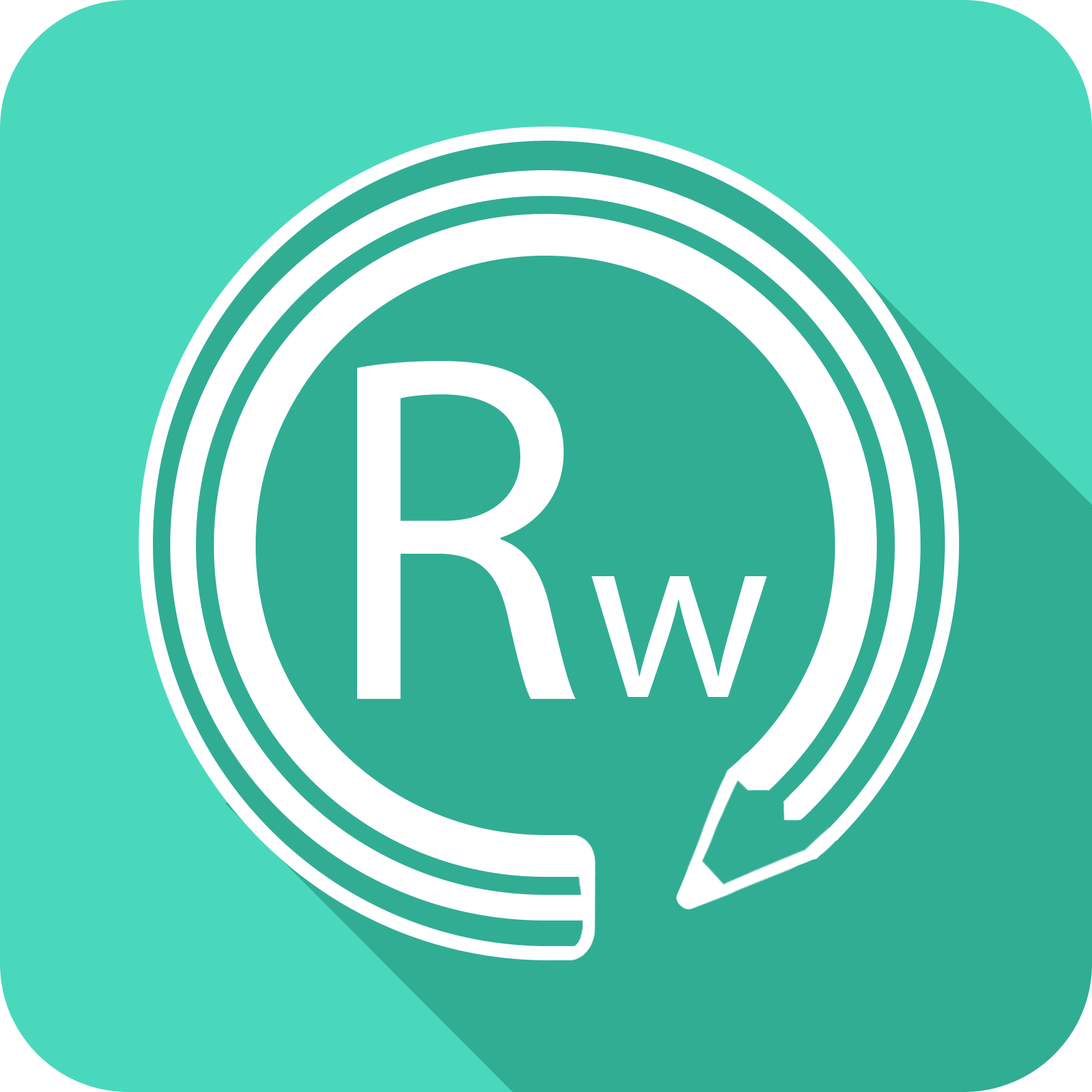
<style>
.page{position:relative;width:1092px;height:1092px;background:#31ad94}
.page>*{position:absolute;margin:0}
.t1{font:497.8px "MyriadPro-Regular";color:#ffffff}
.t2{font:249.2px "MyriadPro-Regular";color:#ffffff}
</style>
<div class="page">
<p class="t1" style="left:357px;top:360px;width:219px;height:339px">R</p>
<p class="t2" style="left:592px;top:576px;width:175px;height:121px">w</p>
</div>
